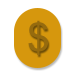
<style>
.page{position:relative;width:75px;height:75px;background:#ffffff}
.page>*{position:absolute;margin:0}
.t1{font:38.9px "ArialMT";letter-spacing:0.025em;color:#966b0e;scale:1.06 1}
</style>
<div class="page">
<p class="t1" style="left:28px;top:20px;width:20px;height:35px">$</p>
</div>
